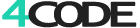
<style>
.page{position:relative;width:140px;height:28px;background:#ffffff}
.page>*{position:absolute;margin:0}
.t1{font:37.5px "LucidaConsole";letter-spacing:-0.14em;color:#212121;font-weight:bold;scale:1.44 1}
.t2{font:37.5px "LucidaConsole";letter-spacing:-0.14em;color:#1dd1ae;font-weight:bold;scale:1.44 1}
</style>
<div class="page">
<p class="t1" style="left:2px;top:0px;width:135px;height:28px"><span class="t2">4</span>CODE</p>
</div>
